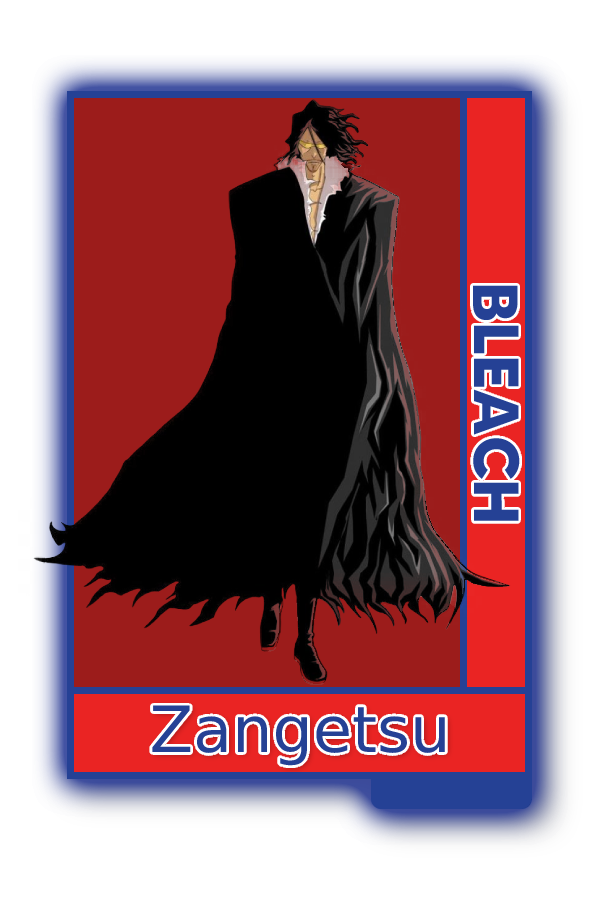
<style>
.page{position:relative;width:600px;height:900px;background:#ffffff}
.page>*{position:absolute;margin:0}
.t1{font:63.6px "MADETOMMY-Bold";color:#254195}
.t2{font:63.6px "CoolveticaRg-Regular";color:#254195}
</style>
<div class="page">
<p class="t1" style="left:473px;top:285px;width:47px;height:236px;rotate:90deg">BLEACH</p>
<p class="t2" style="left:152px;top:705px;width:293px;height:61px">Zangetsu</p>
</div>
